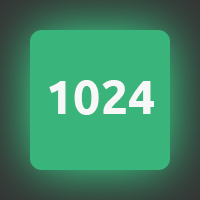
<style>
.page{position:relative;width:200px;height:200px;background:#39b57c}
.page>*{position:absolute;margin:0}
.t1{font:48px "Ubuntu-Bold";color:#f7f7f7}
</style>
<div class="page">
<p class="t1" style="left:49px;top:80px;width:105px;height:35px">1024</p>
</div>
